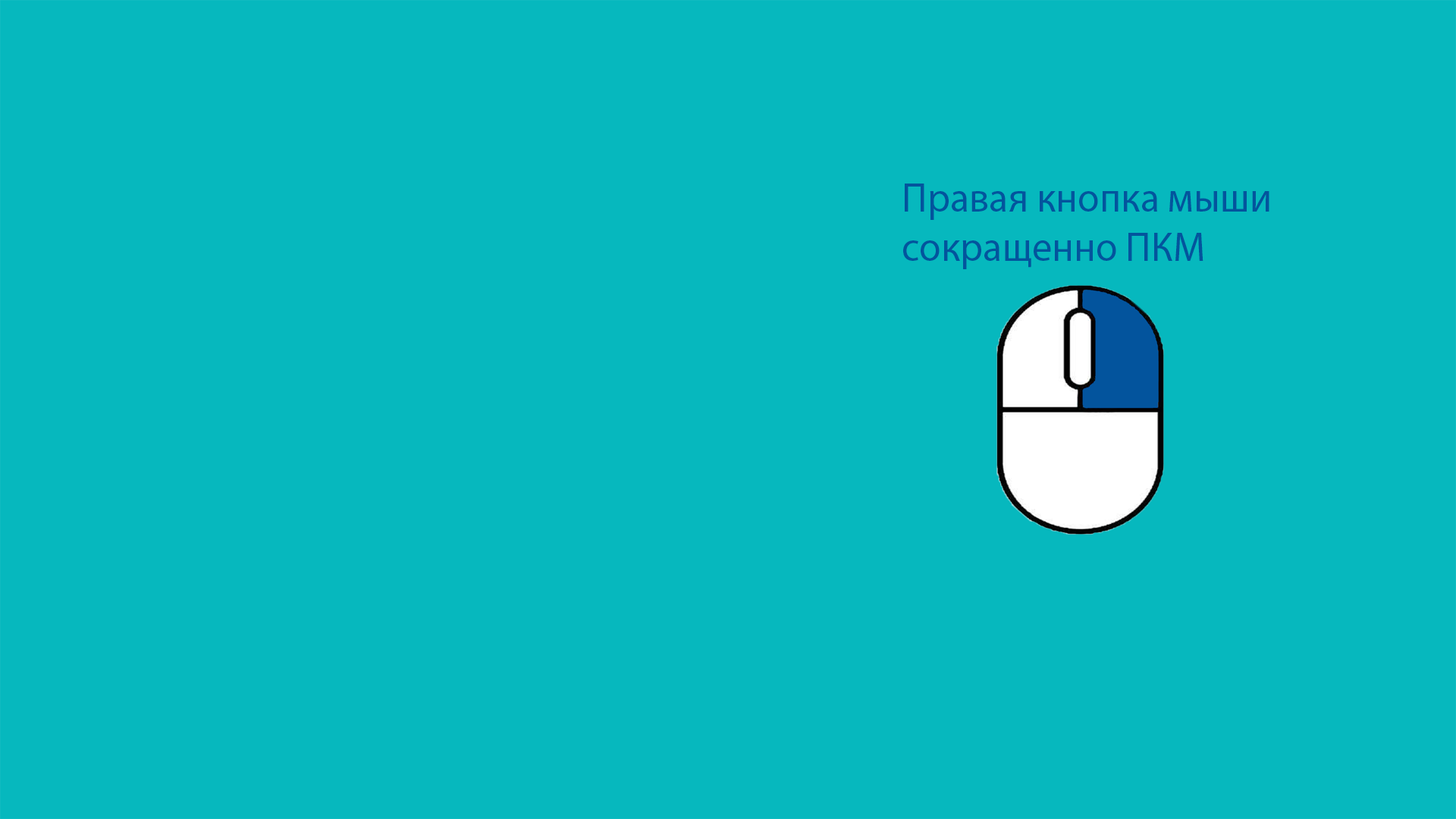
<style>
.page{position:relative;width:1456px;height:819px;background:#06b8be}
.page>*{position:absolute;margin:0}
.t1{font:41px "MyriadPro-Regular";color:#03549d}
</style>
<div class="page">
<p class="t1" style="left:903px;top:184px;width:366px;height:85px">Правая кнопка мыши<br>сокращенно ПКМ</p>
</div>
